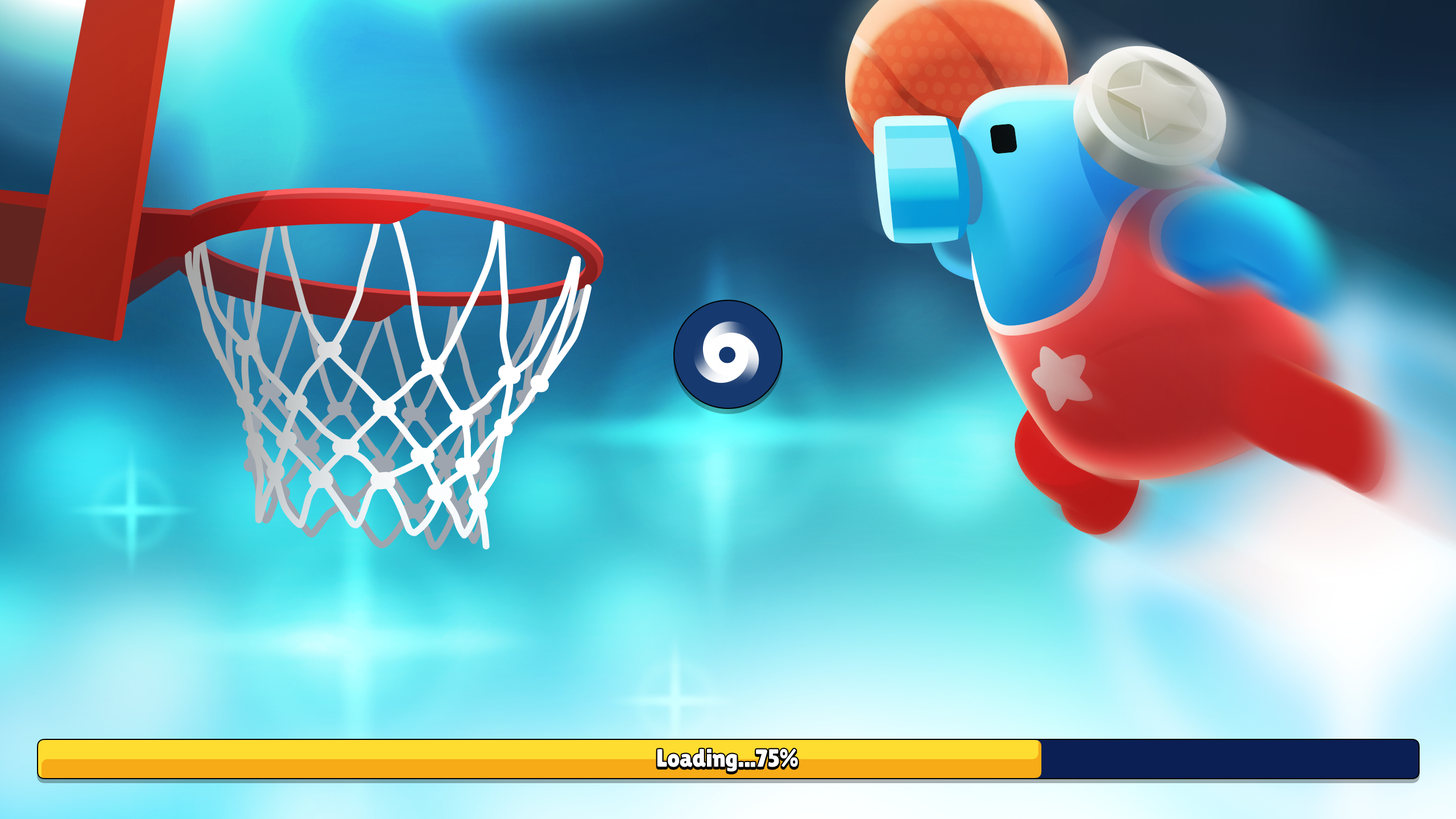
<style>
.page{position:relative;width:1456px;height:819px}
.page>*{position:absolute;margin:0}
.t1{font:25px "LilitaOne";color:#ffffff}
</style>
<div class="page">
<p class="t1" style="left:657px;top:748px;width:141px;height:24px">Loading...75%</p>
</div>
